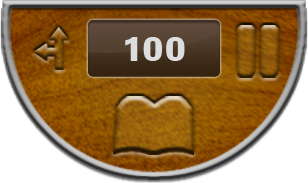
<style>
.page{position:relative;width:308px;height:183px}
.page>*{position:absolute;margin:0}
.t1{font:30.5px "SansFat";letter-spacing:0.1em;color:#dcddde}
.t2{font:30.5px "SansFat";letter-spacing:0.17em;color:#dcddde}
</style>
<div class="page">
<p class="t1" style="left:125px;top:37px;width:60px;height:24px"><span class="t2">1</span>00</p>
</div>
